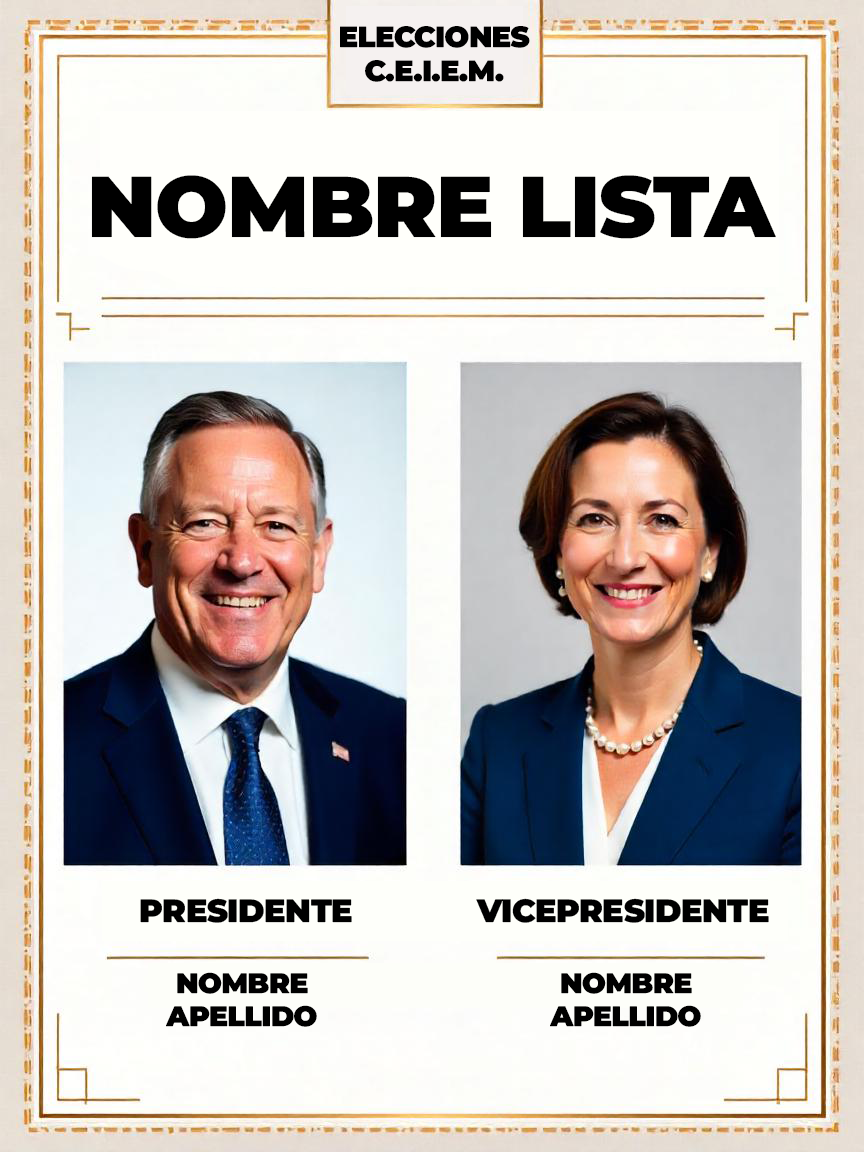
<style>
.page{position:relative;width:864px;height:1152px}
.page>*{position:absolute;margin:0}
.t1{font:28.9px "Montserrat-Black";letter-spacing:-0.013em;color:#000000}
.t2{font:86px "Montserrat-Black";letter-spacing:-0.013em;color:#000000}
.t3{font:32px "Montserrat-Black";letter-spacing:-0.013em;color:#000000}
.t4{font:28px "Montserrat-Black";letter-spacing:-0.013em;color:#000000}
</style>
<div class="page">
<p class="t1" style="left:340px;top:26px;width:190px;height:56px;text-align:center">ELECCIONES<br>C.E.I.E.M.</p>
<p class="t2" style="left:91px;top:175px;width:685px;height:64px">NOMBRE LISTA</p>
<p class="t3" style="left:140px;top:898px;width:212px;height:25px">PRESIDENTE</p>
<p class="t3" style="left:476px;top:898px;width:293px;height:25px">VICEPRESIDENTE</p>
<p class="t4" style="left:166px;top:972px;width:151px;height:55px;text-align:center">NOMBRE<br>APELLIDO</p>
<p class="t4" style="left:550px;top:972px;width:151px;height:55px;text-align:center">NOMBRE<br>APELLIDO</p>
</div>
